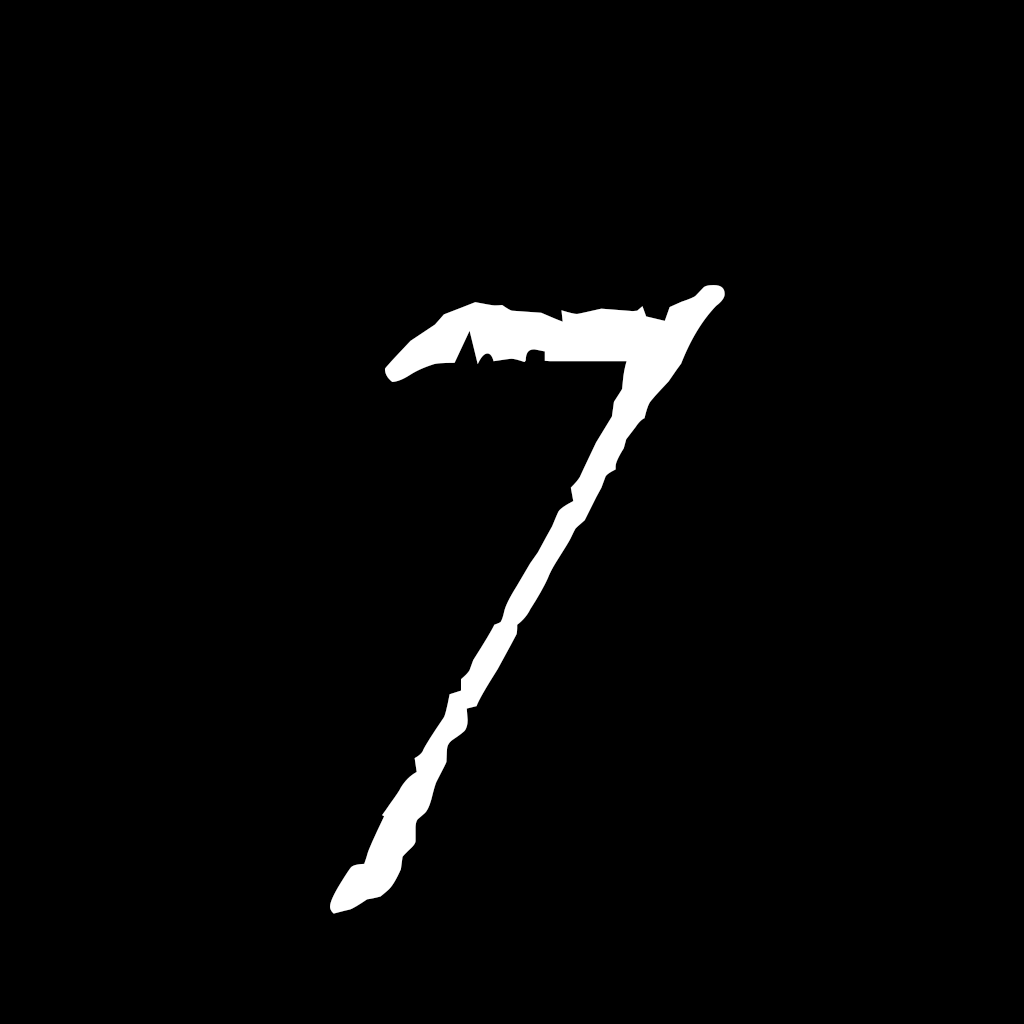
<style>
.page{position:relative;width:1024px;height:1024px;background:#000000}
.page>*{position:absolute;margin:0}
.t1{font:833.3px "Papyrus-Regular";color:#ffffff}
</style>
<div class="page">
<p class="t1" style="left:330px;top:285px;width:395px;height:629px">7</p>
</div>
